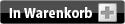
<style>
.page{position:relative;width:125px;height:24px;background:#4d4d4d}
.page>*{position:absolute;margin:0}
.t1{font:13px "KozGoPro-Heavy";color:#fefefe}
</style>
<div class="page">
<p class="t1" style="left:9px;top:7px;width:83px;height:11px">In Warenkorb</p>
</div>
